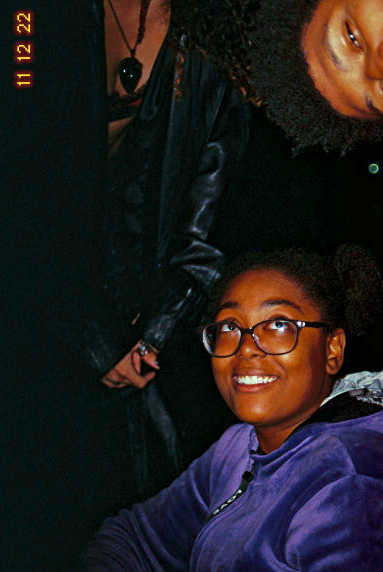
<style>
.page{position:relative;width:383px;height:572px}
.page>*{position:absolute;margin:0}
.t1{font:18.8px "LoRes12OT-Regular";color:#ffe432}
</style>
<div class="page">
<p class="t1" style="left:17px;top:13px;width:13px;height:73px;rotate:-90deg">11  12  22</p>
</div>
